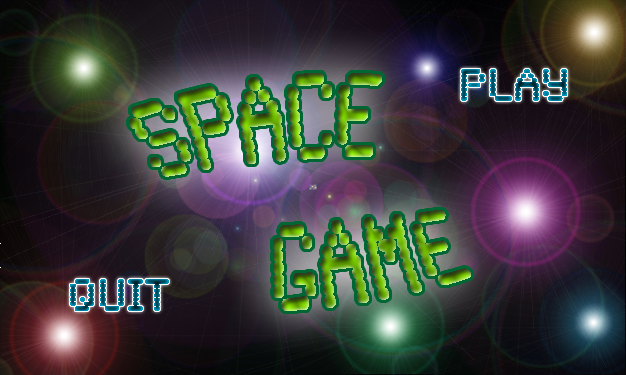
<style>
.page{position:relative;width:626px;height:375px}
.page>*{position:absolute;margin:0}
.t1{font:100px "SynchroLET"}
.t2{font:48px "SynchroLET"}
</style>
<div class="page">
<p class="t1" style="left:129px;top:73px;width:342px;height:238px;rotate:-4deg">Space<br>    Game</p>
<p class="t2" style="left:461px;top:69px;width:106px;height:32px">Play</p>
<p class="t2" style="left:70px;top:279px;width:99px;height:32px">Quit</p>
</div>
